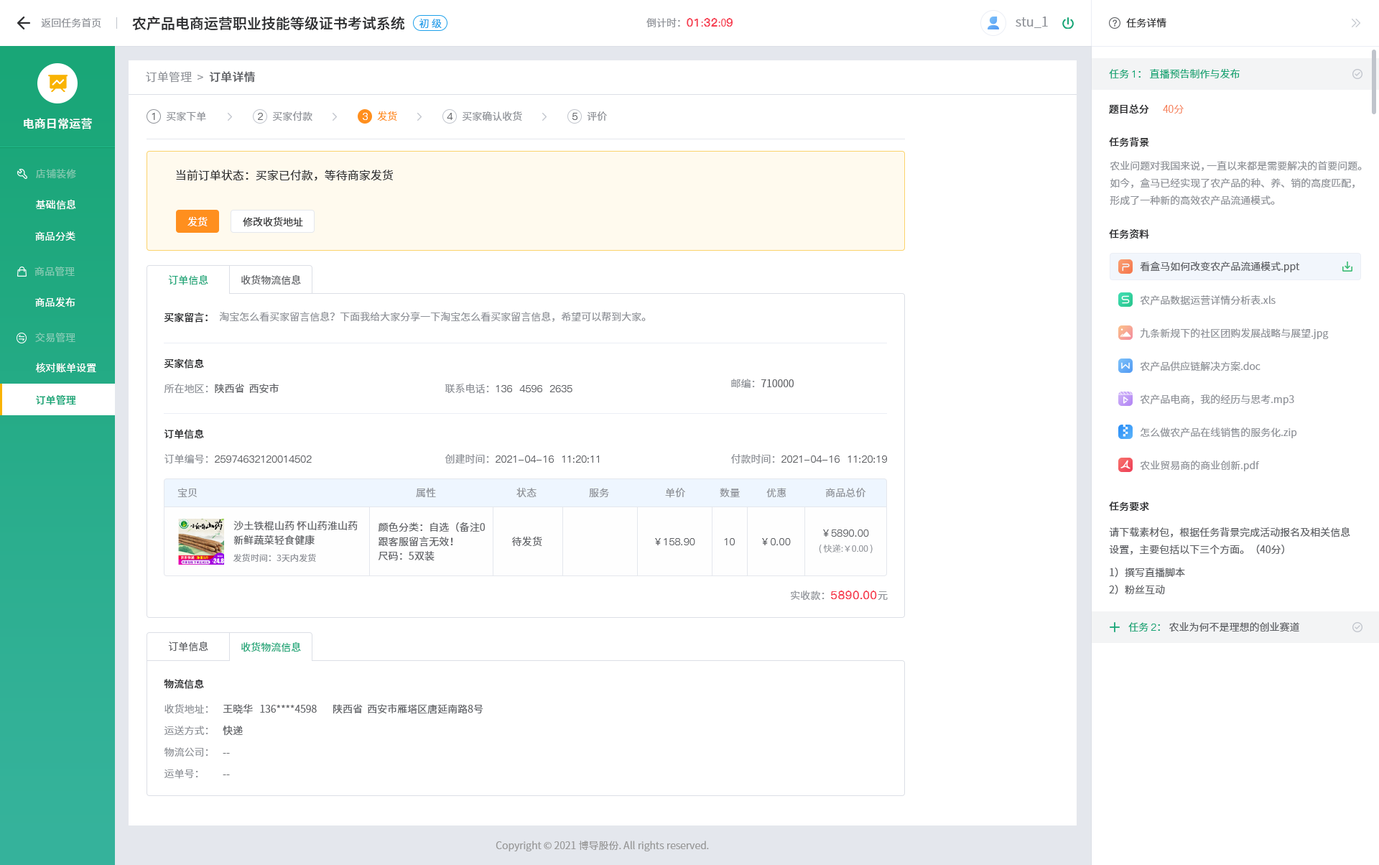
<style>
.page{position:relative;width:1379px;height:865px;background:#ffffff}
.page>*{position:absolute;margin:0}
.t1{font:10.1px "SourceHanSansCN-Normal";color:#909399}
.t2{font:14.4px "SourceHanSansCN-Medium";color:#303133}
.t3{font:11.5px "PingFang-SC-Heavy";color:#f63f52}
.t4{font:10.1px "SourceHanSansCN-Normal";color:#f63f52}
.t5{font:12.9px "SourceHanSansCN-Normal";color:#909399}
.t6{font:10.1px "SourceHanSansCN-Normal";color:#303133}
.t7{font:10.1px "SourceHanSansCN-Normal";color:#1da0ea}
.t8{font:11.5px "SourceHanSansCN-Normal";letter-spacing:0.01em;color:#909399}
.t9{font:11.5px "SourceHanSansCN-Medium";letter-spacing:0.01em;color:#606266}
.t10{font:10.1px "SourceHanSansCN-Normal";color:#19a677}
.t11{font:10.1px "PingFang-SC-Medium";color:#19a677}
.t12{font:10.1px "PingFang-SC-Medium";color:#606266}
.t13{font:10.1px "PingFang-SC-Medium";color:#ffffff}
.t14{font:10.1px "SourceHanSansCN-Normal";color:#ff8f1e}
.t15{font:10.1px "SourceHanSansCN-Medium";color:#303133}
.t16{font:10.1px "SourceHanSansCN-Light";color:#f67d53}
.t17{font:11.5px "SourceHanSansCN-Medium";letter-spacing:0.01em;color:#ffffff}
.t18{font:10.1px/17.2px "SourceHanSansCN-Normal";color:#909399}
.t19{font:10.1px "SourceHanSansCN-Regular";letter-spacing:0.01em;color:#81c8af}
.t20{font:11.5px "SourceHanSansCN-Normal";color:#303133}
.t21{font:10.1px "SourceHanSansCN-Normal";letter-spacing:0.01em;color:#ffffff}
.t22{font:10.1px "SourceHanSansCN-Normal";color:#ffffff}
.t23{font:10.1px "SourceHanSansCN-Regular";letter-spacing:0.01em;color:#81cab2}
.t24{font:10.1px "SourceHanSansCN-Normal";color:#606266}
.t25{font:10.1px "SourceHanSansSC-Normal";color:#1aa678}
.t26{font:10.1px "SourceHanSansSC-Normal";color:#606266}
.t27{font:10.1px "SourceHanSansCN-Regular";letter-spacing:0.01em;color:#ffffff}
.t28{font:10.1px "SourceHanSansSC-Medium";color:#303133}
.t29{font:10.1px "SourceHanSansSC-Normal";color:#909399}
.t30{font:10.1px "SourceHanSansCN-Regular";letter-spacing:0.01em;color:#82cab4}
.t31{font:10.1px "SourceHanSansCN-Medium";letter-spacing:0.01em;color:#19a677}
.t32{font:10.1px "SourceHanSansCN-Normal";letter-spacing:0.01em;color:#909399}
.t33{font:10.1px/14.4px "SourceHanSansCN-Normal";letter-spacing:0.01em;color:#606266}
.t34{font:10.1px "PingFang-SC-Medium";letter-spacing:0.01em;color:#606266}
.t35{font:10.1px/17.2px "SourceHanSansCN-Normal";color:#606266}
.t36{font:10.1px "SourceHanSansCN-Normal";letter-spacing:0.01em;color:#606266}
.t37{font:8.6px "SourceHanSansCN-Light";letter-spacing:0.01em;color:#909399}
.t38{font:8.6px "SourceHanSansCN-Normal";letter-spacing:0.01em;color:#909399}
.t39{font:11.5px "PingFang-SC-Bold";letter-spacing:0.01em;color:#f63f52}
.t40{font:10.1px "PingFang-SC-Medium";color:#1aa678}
.t41{font:10.1px "SourceHanSansCN-Normal";color:#1aa678}
.t42{font:10.1px "SourceHanSansSC-Normal";color:#19a677}
.t43{font:10.1px/21.5px "SourceHanSansSC-Normal";color:#909399}
.t44{font:10.1px/21.5px "SourceHanSansSC-Normal";color:#606266}
.t45{font:10.1px "SourceHanSansCN-Normal";color:#999999}
</style>
<div class="page">
<p class="t1" style="left:41px;top:18px;width:60px;height:10px">返回任务首页</p>
<p class="t2" style="left:132px;top:16px;width:273px;height:14px">农产品电商运营职业技能等级证书考试系统</p>
<p class="t1" style="left:646px;top:18px;width:87px;height:10px">倒计时：<span class="t3">01</span><span class="t4">:</span><span class="t3">32</span><span class="t4">:0</span><span class="t3">9</span></p>
<p class="t5" style="left:1016px;top:17px;width:32px;height:11px">stu_1</p>
<p class="t6" style="left:1126px;top:18px;width:40px;height:10px">任务详情</p>
<p class="t7" style="left:419px;top:19px;width:23px;height:10px">初 级</p>
<p class="t8" style="left:146px;top:71px;width:109px;height:12px">订单管理  &gt;<span class="t9">  订单详情</span></p>
<p class="t10" style="left:1109px;top:68px;width:131px;height:11px">任务 <span class="t11">1</span>： 直播预告制作与发布</p>
<p class="t12" style="left:152px;top:113px;width:3px;height:7px">1</p>
<p class="t1" style="left:166px;top:111px;width:40px;height:10px">买家下单</p>
<p class="t12" style="left:258px;top:113px;width:5px;height:7px">2</p>
<p class="t1" style="left:272px;top:111px;width:40px;height:10px">买家付款</p>
<p class="t13" style="left:363px;top:113px;width:5px;height:7px">3</p>
<p class="t14" style="left:377px;top:111px;width:20px;height:10px">发货</p>
<p class="t12" style="left:447px;top:113px;width:6px;height:7px">4</p>
<p class="t1" style="left:462px;top:111px;width:60px;height:10px">买家确认收货</p>
<p class="t12" style="left:572px;top:113px;width:5px;height:7px">5</p>
<p class="t1" style="left:587px;top:111px;width:20px;height:10px">评价</p>
<p class="t15" style="left:1109px;top:104px;width:40px;height:10px">题目总分</p>
<p class="t16" style="left:1163px;top:105px;width:21px;height:8px">40分</p>
<p class="t17" style="left:24px;top:118px;width:68px;height:11px">电商日常运营</p>
<p class="t15" style="left:1109px;top:136px;width:40px;height:11px">任务背景</p>
<p class="t18" style="left:1110px;top:161px;width:252px;height:44px">农业问题对我国来说，一直以来都是需要解决的首要问题。如今，盒马已经实现了农产品的种、养、销的高度匹配，形成了一种新的高效农产品流通模式。</p>
<p class="t19" style="left:36px;top:169px;width:40px;height:10px">店铺装修</p>
<p class="t20" style="left:176px;top:169px;width:217px;height:12px">当前订单状态：买家已付款，等待商家发货</p>
<p class="t21" style="left:36px;top:199px;width:40px;height:11px">基础信息</p>
<p class="t22" style="left:187px;top:216px;width:21px;height:10px">发货</p>
<p class="t6" style="left:243px;top:217px;width:60px;height:10px">修改收货地址</p>
<p class="t21" style="left:35px;top:231px;width:40px;height:10px">商品分类</p>
<p class="t15" style="left:1109px;top:228px;width:40px;height:11px">任务资料</p>
<p class="t23" style="left:34px;top:266px;width:41px;height:11px">商品管理</p>
<p class="t24" style="left:1140px;top:261px;width:160px;height:11px">看盒马如何改变农产品流通模式.ppt</p>
<p class="t25" style="left:168px;top:274px;width:40px;height:11px">订单信息</p>
<p class="t26" style="left:241px;top:274px;width:60px;height:11px">收货物流信息</p>
<p class="t27" style="left:35px;top:297px;width:40px;height:10px">商品发布</p>
<p class="t1" style="left:1140px;top:295px;width:136px;height:10px">农产品数据运营详情分析表.xls</p>
<p class="t28" style="left:164px;top:312px;width:44px;height:10px">买家留言：</p>
<p class="t29" style="left:219px;top:311px;width:427px;height:11px">淘宝怎么看买家留言信息？下面我给大家分享一下淘宝怎么看买家留言信息，希望可以帮到大家。</p>
<p class="t1" style="left:1140px;top:328px;width:189px;height:11px">九条新规下的社区团购发展战略与展望.jpg</p>
<p class="t30" style="left:35px;top:333px;width:40px;height:10px">交易管理</p>
<p class="t21" style="left:36px;top:363px;width:60px;height:10px">核对账单设置</p>
<p class="t28" style="left:164px;top:358px;width:40px;height:10px">买家信息</p>
<p class="t1" style="left:1140px;top:361px;width:120px;height:10px">农产品供应链解决方案.doc</p>
<p class="t26" style="left:164px;top:383px;width:115px;height:11px"><span class="t29">所在地区：</span>陕西省  西安市</p>
<p class="t12" style="left:445px;top:384px;width:127px;height:10px"><span class="t29">联系电话：</span>136  4596  2635</p>
<p class="t26" style="left:731px;top:378px;width:63px;height:10px"><span class="t29">邮编：</span>710000</p>
<p class="t31" style="left:36px;top:394px;width:40px;height:11px">订单管理</p>
<p class="t1" style="left:1140px;top:394px;width:154px;height:11px">农产品电商，我的经历与思考.mp3</p>
<p class="t28" style="left:164px;top:429px;width:40px;height:10px">订单信息</p>
<p class="t1" style="left:1141px;top:427px;width:156px;height:11px">怎么做农产品在线销售的服务化.zip</p>
<p class="t12" style="left:164px;top:454px;width:148px;height:10px"><span class="t29">订单编号：</span>25974632120014502</p>
<p class="t12" style="left:445px;top:454px;width:154px;height:9px"><span class="t29">创建时间：</span>2021-04-16  11:20:11</p>
<p class="t12" style="left:731px;top:454px;width:156px;height:9px"><span class="t29">付款时间：</span>2021-04-16  11:20:19</p>
<p class="t1" style="left:1140px;top:460px;width:120px;height:11px">农业贸易商的商业创新.pdf</p>
<p class="t32" style="left:177px;top:488px;width:21px;height:9px">宝贝</p>
<p class="t32" style="left:416px;top:488px;width:20px;height:10px">属性</p>
<p class="t32" style="left:516px;top:487px;width:21px;height:10px">状态</p>
<p class="t32" style="left:589px;top:488px;width:20px;height:9px">服务</p>
<p class="t32" style="left:665px;top:488px;width:20px;height:10px">单价</p>
<p class="t32" style="left:720px;top:488px;width:20px;height:9px">数量</p>
<p class="t32" style="left:766px;top:488px;width:20px;height:10px">优惠</p>
<p class="t32" style="left:825px;top:488px;width:41px;height:9px">商品总价</p>
<p class="t15" style="left:1109px;top:501px;width:40px;height:10px">任务要求</p>
<p class="t33" style="left:233px;top:521px;width:125px;height:24px">沙土铁棍山药 怀山药淮山药新鲜蔬菜轻食健康</p>
<p class="t33" style="left:378px;top:522px;width:107px;height:39px">颜色分类：自选（备注0<br>跟客服留言无效！<br>尺码：5双装</p>
<p class="t34" style="left:823px;top:529px;width:46px;height:8px">￥5890.00</p>
<p class="t35" style="left:1109px;top:526px;width:241px;height:69px">请下载素材包，根据任务背景完成活动报名及相关信息设置，主要包括以下三个方面。（40分）<br>1）撰写直播脚本<br>2）粉丝互动</p>
<p class="t36" style="left:512px;top:536px;width:30px;height:10px">待发货</p>
<p class="t34" style="left:655px;top:538px;width:40px;height:7px">￥158.90</p>
<p class="t34" style="left:724px;top:538px;width:11px;height:7px">10</p>
<p class="t34" style="left:762px;top:538px;width:29px;height:7px">￥0.00</p>
<p class="t37" style="left:819px;top:544px;width:54px;height:9px">( 快递:￥0.00 )</p>
<p class="t38" style="left:233px;top:553px;width:83px;height:9px">发货时间：3天内发货</p>
<p class="t39" style="left:791px;top:590px;width:97px;height:10px"><span class="t32">实收款：</span>5890.00<span class="t32">元</span></p>
<p class="t24" style="left:1128px;top:622px;width:171px;height:10px"><span class="t10">任务 </span><span class="t40">2</span><span class="t41">：</span> 农业为何不是理想的创业赛道</p>
<p class="t26" style="left:168px;top:641px;width:40px;height:10px">订单信息</p>
<p class="t42" style="left:241px;top:641px;width:60px;height:11px">收货物流信息</p>
<p class="t28" style="left:164px;top:679px;width:40px;height:10px">物流信息</p>
<p class="t43" style="left:164px;top:704px;width:44px;height:75px">收货地址：<br>运送方式：<br>物流公司：<br>运单号：</p>
<p class="t44" style="left:223px;top:703px;width:260px;height:72px">王晓华   136****4598       陕西省  西安市雁塔区唐延南路8号<br>快递<br>--<br>--</p>
<p class="t45" style="left:496px;top:840px;width:213px;height:11px">Copyright © 2021 博导股份. All rights reserved.</p>
</div>
